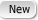
<style>
.page{position:relative;width:38px;height:20px}
.page>*{position:absolute;margin:0}
.t1{font:11px "Verdana";color:#000000;scale:0.9 1}
</style>
<div class="page">
<p class="t1" style="left:9px;top:5px;width:21px;height:9px">New</p>
</div>
